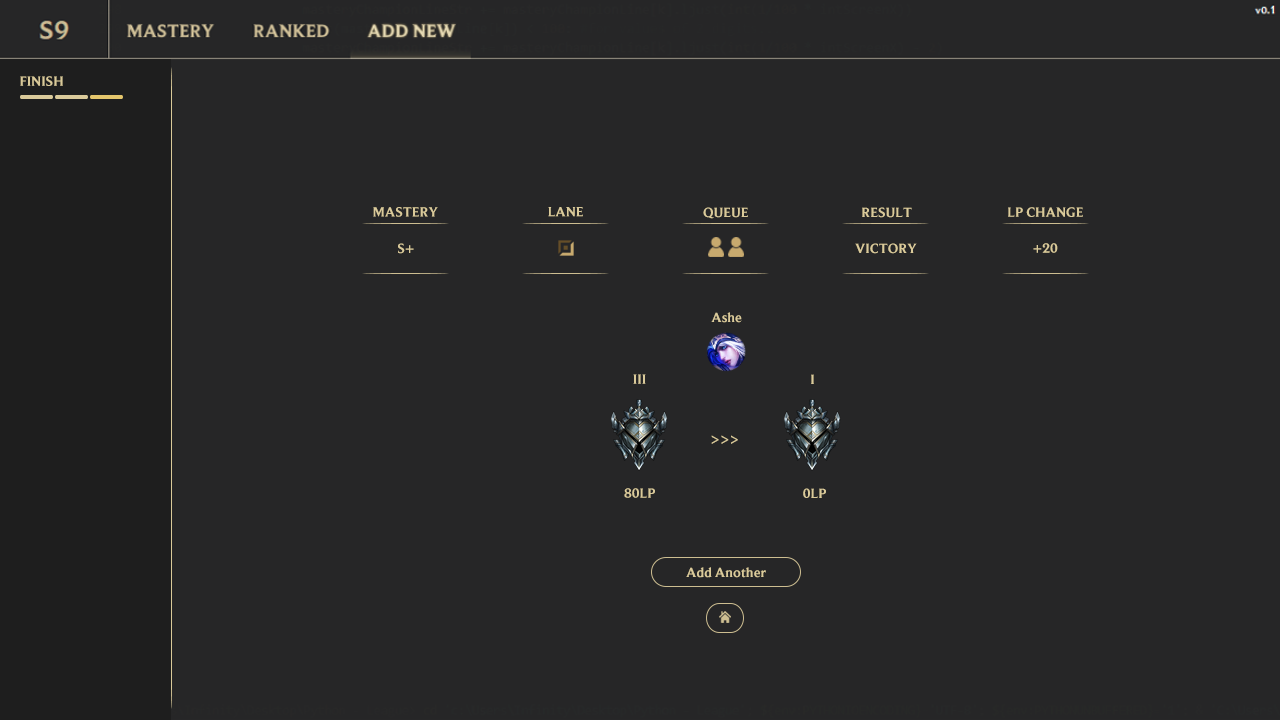
<style>
.page{position:relative;width:1280px;height:720px;background:#262627}
.page>*{position:absolute;margin:0}
.t1{font:14px "BeaufortforLOL-Bold";color:#daca9a}
</style>
<div class="page">
<p class="t1" style="left:20px;top:76px;width:43px;height:10px">FINISH</p>
<p class="t1" style="left:373px;top:207px;width:65px;height:10px">MASTERY</p>
<p class="t1" style="left:548px;top:207px;width:35px;height:10px">LANE</p>
<p class="t1" style="left:703px;top:207px;width:45px;height:12px">QUEUE</p>
<p class="t1" style="left:862px;top:207px;width:50px;height:11px">RESULT</p>
<p class="t1" style="left:1008px;top:207px;width:75px;height:10px">LP CHANGE</p>
<p class="t1" style="left:398px;top:243px;width:16px;height:11px">S+</p>
<p class="t1" style="left:855px;top:243px;width:62px;height:11px">VICTORY</p>
<p class="t1" style="left:1033px;top:243px;width:25px;height:10px">+20</p>
<p class="t1" style="left:711px;top:312px;width:31px;height:11px">Ashe</p>
<p class="t1" style="left:633px;top:374px;width:13px;height:10px">III</p>
<p class="t1" style="left:811px;top:374px;width:3px;height:10px">I</p>
<p class="t1" style="left:711px;top:435px;width:27px;height:9px">&gt;&gt;&gt;</p>
<p class="t1" style="left:624px;top:488px;width:31px;height:10px">80LP</p>
<p class="t1" style="left:803px;top:488px;width:23px;height:10px">0LP</p>
<p class="t1" style="left:686px;top:567px;width:80px;height:11px">Add Another</p>
</div>
